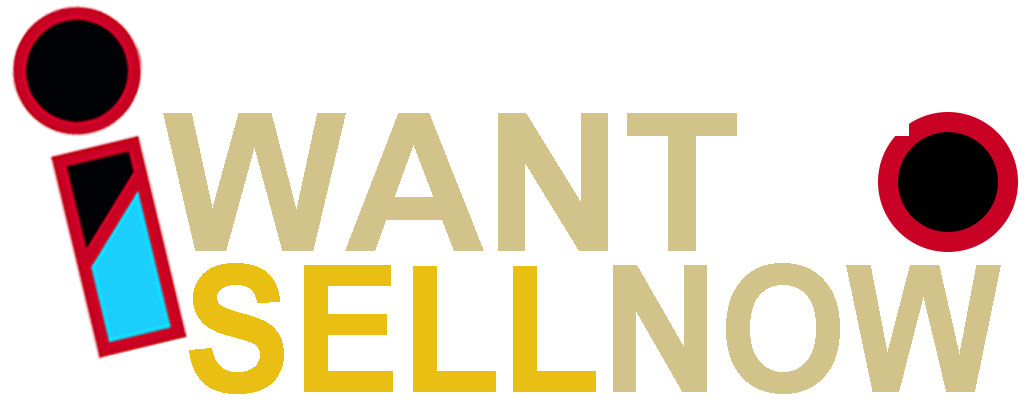
<style>
.page{position:relative;width:1036px;height:403px;background:#ffffff}
.page>*{position:absolute;margin:0}
.t1{font:192.7px "Arial-BoldMT";color:#d1c389;text-transform:uppercase}
.t2{font:192.7px "Arial-BoldMT";color:#ffffff;text-transform:uppercase}
.t3{font:177px "Arial-BoldMT";color:#e9bf13;text-transform:uppercase;scale:0.92 1}
.t4{font:177px "Arial-BoldMT";color:#d1c389;text-transform:uppercase;scale:0.92 1}
</style>
<div class="page">
<p class="t1" style="left:163px;top:113px;width:746px;height:138px">want <span class="t2">t</span></p>
<p class="t3" style="left:189px;top:263px;width:812px;height:131px">sell<span class="t4">now</span></p>
</div>
